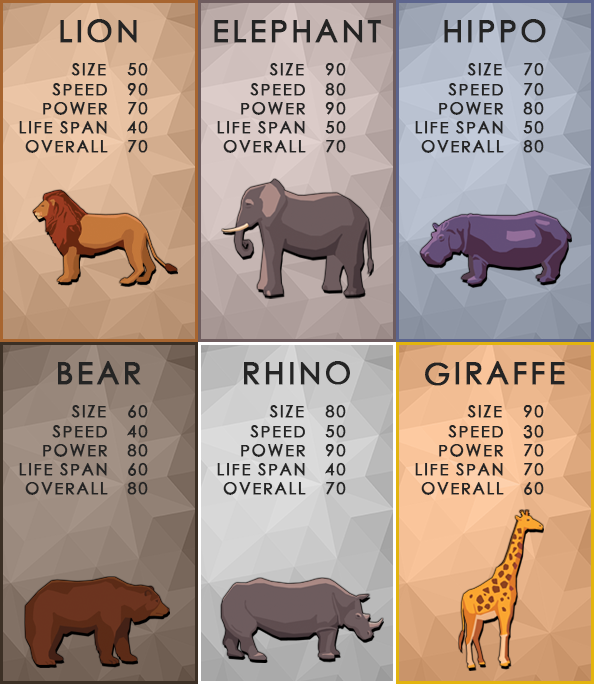
<style>
.page{position:relative;width:594px;height:684px}
.page>*{position:absolute;margin:0}
.t1{font:30px "STHeitiTC-Medium";letter-spacing:0.1em;color:#242424;font-weight:bold}
.t2{font:16px "STHeitiTC-Medium";letter-spacing:0.1em;color:#242424;font-weight:bold}
</style>
<div class="page">
<p class="t1" style="left:60px;top:19px;width:77px;height:24px">LION</p>
<p class="t1" style="left:214px;top:19px;width:167px;height:24px">ELEPHANT</p>
<p class="t1" style="left:444px;top:19px;width:102px;height:24px">HIPPO</p>
<p class="t2" style="left:19px;top:62px;width:129px;height:91px;text-align:right">SIZE    50<br>SPEED   90<br>POWER   70<br>LIFE SPAN   40<br>OVERALL   70</p>
<p class="t2" style="left:217px;top:62px;width:129px;height:91px;text-align:right">SIZE    90<br>SPEED   80<br>POWER   90<br>LIFE SPAN   50<br>OVERALL   70</p>
<p class="t2" style="left:415px;top:62px;width:129px;height:91px;text-align:right">SIZE    70<br>SPEED   70<br>POWER   80<br>LIFE SPAN   50<br>OVERALL   80</p>
<p class="t1" style="left:58px;top:361px;width:83px;height:24px">BEAR</p>
<p class="t1" style="left:244px;top:361px;width:106px;height:24px">RHINO</p>
<p class="t1" style="left:425px;top:361px;width:140px;height:25px">GIRAFFE</p>
<p class="t2" style="left:19px;top:404px;width:129px;height:91px;text-align:right">SIZE    60<br>SPEED   40<br>POWER   80<br>LIFE SPAN   60<br>OVERALL   80</p>
<p class="t2" style="left:217px;top:404px;width:129px;height:91px;text-align:right">SIZE    80<br>SPEED   50<br>POWER   90<br>LIFE SPAN   40<br>OVERALL   70</p>
<p class="t2" style="left:415px;top:404px;width:129px;height:91px;text-align:right">SIZE    90<br>SPEED   30<br>POWER   70<br>LIFE SPAN   70<br>OVERALL   60</p>
</div>
